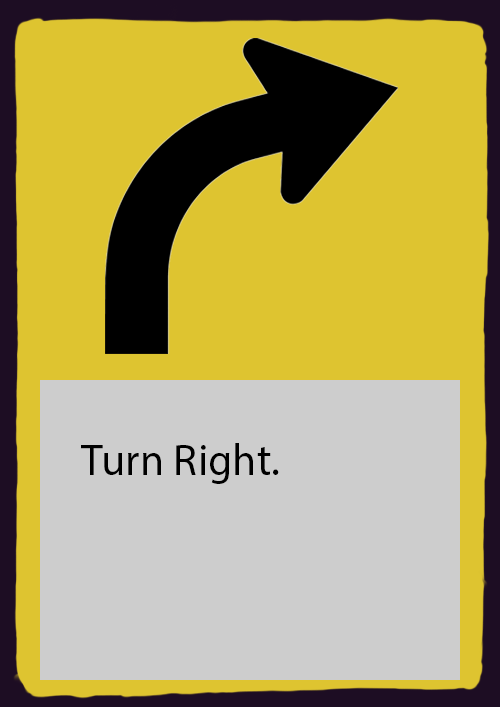
<style>
.page{position:relative;width:500px;height:707px;background:#dec430}
.page>*{position:absolute;margin:0}
.t1{font:44px "MyriadPro-Regular";color:#000000}
</style>
<div class="page">
<p class="t1" style="left:81px;top:443px;width:198px;height:41px">Turn Right.</p>
</div>
